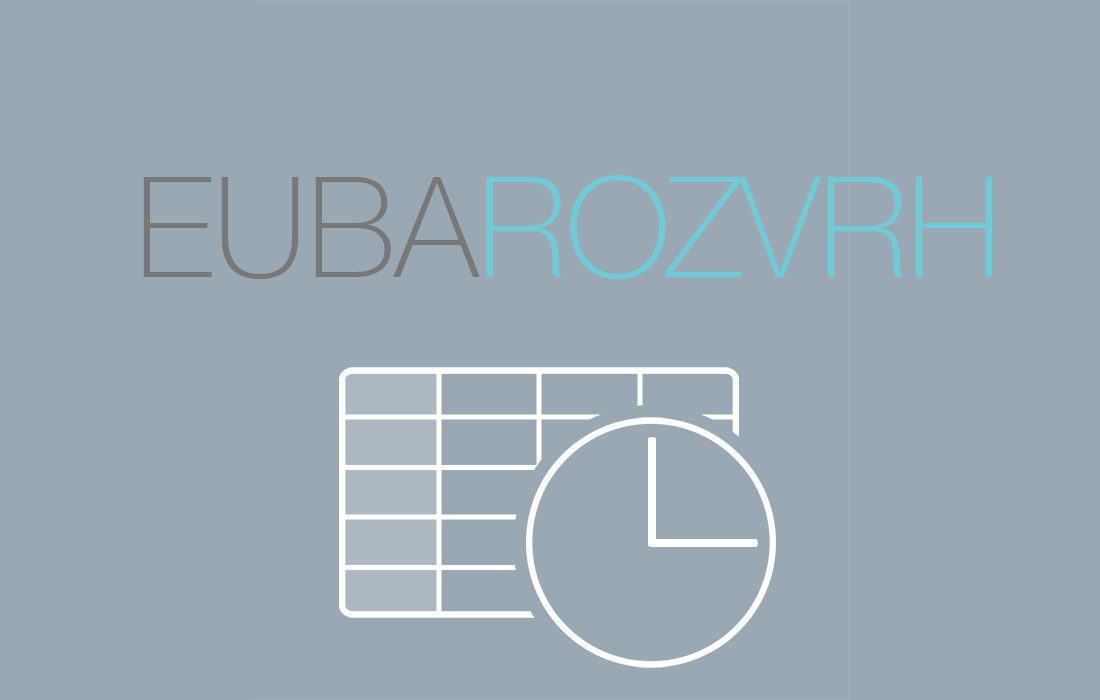
<style>
.page{position:relative;width:1100px;height:700px;background:#9aa8b3}
.page>*{position:absolute;margin:0}
.t1{font:140px "HelveticaNeue-Thin";color:#6eccd9}
.t2{font:140px "HelveticaNeue-Thin";color:#787878}
</style>
<div class="page">
<p class="t1" style="left:143px;top:175px;width:849px;height:104px"><span class="t2">EUBA</span>ROZVRH</p>
</div>
